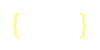
<style>
.page{position:relative;width:100px;height:50px;background:#ffffff}
.page>*{position:absolute;margin:0}
.t1{font:29.9px "FranklinGothic-Book";color:#ffffb8}
.t2{font:29.9px "FranklinGothic-Book"}
</style>
<div class="page">
<p class="t1" style="left:11px;top:13px;width:8px;height:25px">{</p>
<p class="t2" style="left:12px;top:13px;width:8px;height:25px">{</p>
<p class="t2" style="left:80px;top:13px;width:7px;height:25px">}</p>
<p class="t1" style="left:81px;top:13px;width:7px;height:25px">}</p>
</div>
